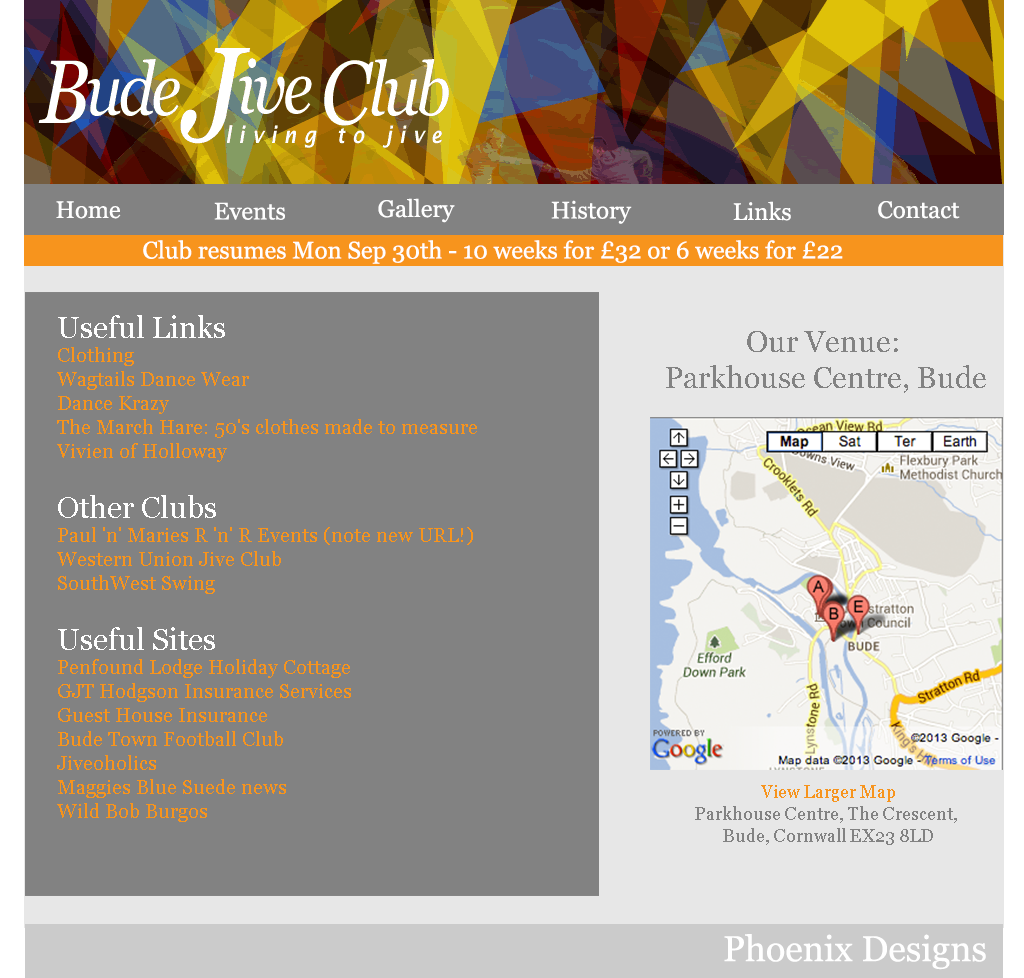
<style>
.page{position:relative;width:1024px;height:978px;background:#828282}
.page>*{position:absolute;margin:0}
.t1{font:24px "Georgia";color:#ffffff}
.t2{font:20px "Georgia";color:#f7941d}
.t3{font:30px "Georgia";color:#ffffff}
.t4{font:29.8px "Georgia";color:#828282}
.t5{font:18px "Georgia";color:#828282}
.t6{font:18px "Georgia";color:#f7941d}
.t7{font:36px "Georgia";color:#ffffff}
</style>
<div class="page">
<p class="t1" style="left:378px;top:198px;width:77px;height:25px">Gallery</p>
<p class="t1" style="left:56px;top:201px;width:65px;height:18px">Home</p>
<p class="t1" style="left:214px;top:202px;width:71px;height:18px">Events</p>
<p class="t1" style="left:551px;top:200px;width:81px;height:24px">History</p>
<p class="t1" style="left:733px;top:201px;width:58px;height:20px">Links</p>
<p class="t1" style="left:878px;top:201px;width:82px;height:18px">Contact</p>
<p class="t1" style="left:143px;top:240px;width:700px;height:24px">Club resumes Mon Sep 30th - 10 weeks for £32 or 6 weeks for £22</p>
<p class="t2" style="left:57px;top:315px;width:420px;height:507px"><span class="t3">Useful Links<br></span>Clothing<br>Wagtails Dance Wear<br>Dance Krazy<br>The March Hare: 50's clothes made to measure<br>Vivien of Holloway<br><br><span class="t3">Other Clubs<br></span>Paul 'n' Maries R 'n' R Events (note new URL!)<br>Western Union Jive Club<br>SouthWest Swing<br><br><span class="t3">Useful Sites<br></span>Penfound Lodge Holiday Cottage<br>GJT Hodgson Insurance Services<br>Guest House Insurance<br>Bude Town Football Club<br>Jiveoholics<br>Maggies Blue Suede news<br>Wild Bob Burgos</p>
<p class="t4" style="left:666px;top:331px;width:320px;height:62px;text-align:center">Our Venue: <br>Parkhouse Centre, Bude</p>
<p class="t5" style="left:695px;top:785px;width:262px;height:60px;text-align:center"><span class="t6">View Larger Map<br></span>Parkhouse Centre, The Crescent, <br>Bude, Cornwall EX23 8LD</p>
<p class="t7" style="left:724px;top:934px;width:262px;height:36px">Phoenix Designs</p>
</div>
